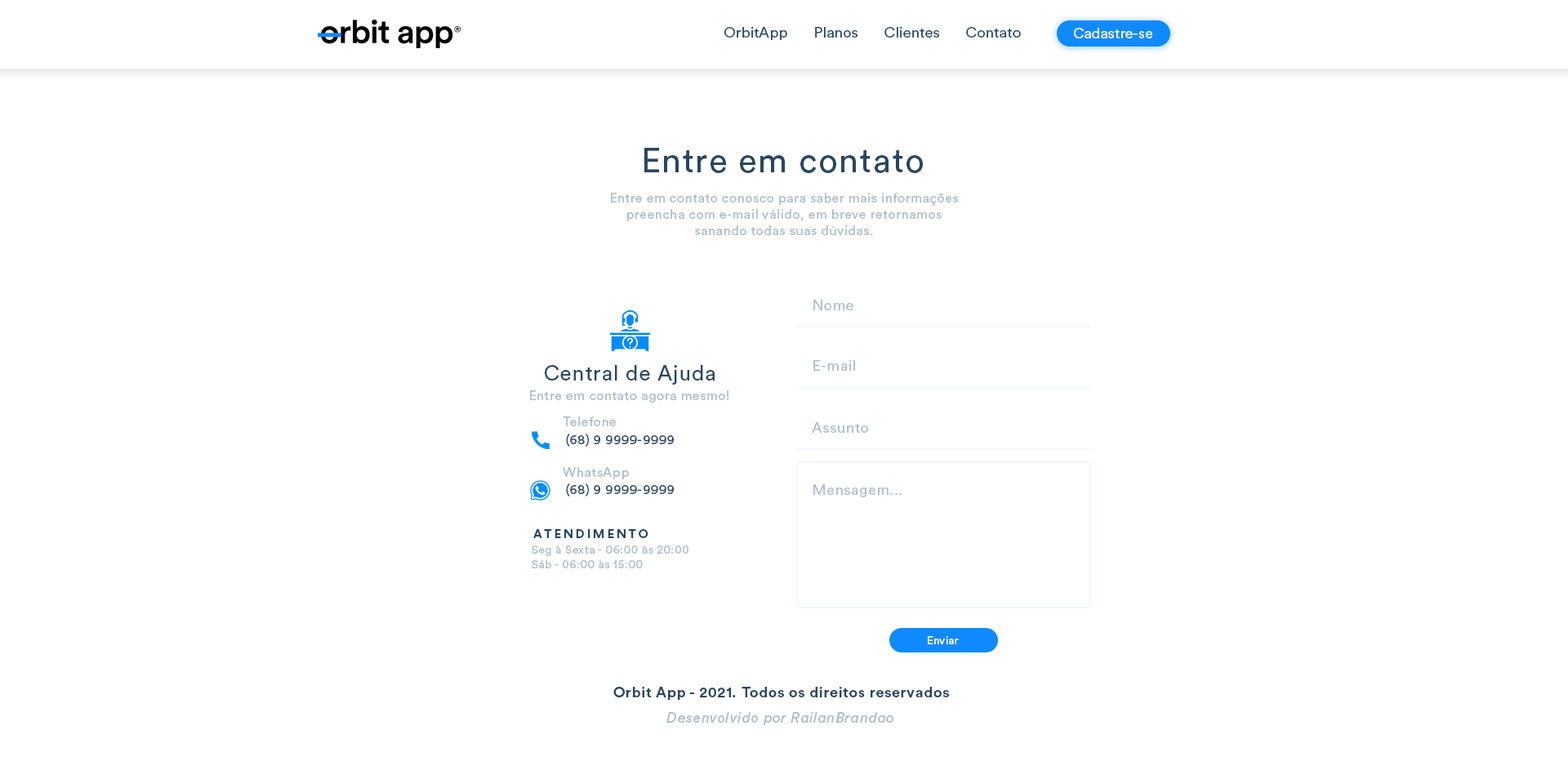
<style>
.page{position:relative;width:1568px;height:757px;background:#ffffff}
.page>*{position:absolute;margin:0}
.t1{font:14.7px "CircularStd-Book";color:#294661}
.t2{font:14.7px "CircularStd-Book";color:#feffff}
.t3{font:34.3px "CircularStd-Book";letter-spacing:0.036em;color:#294661}
.t4{font:13.1px/16.3px "CircularStd-Book";letter-spacing:0.036em;color:#aebcc9}
.t5{font:14.7px "CircularStd-Book";letter-spacing:0.036em;color:#aebcc9}
.t6{font:21.2px "CircularStd-Book";letter-spacing:0.036em;color:#294661}
.t7{font:13.1px "CircularStd-Book";letter-spacing:0.036em;color:#aebcc9}
.t8{font:13.1px "CircularStd-Book";letter-spacing:0.036em;color:#294661}
.t9{font:12.3px "CircularStd-Bold";letter-spacing:0.2em;color:#294661}
.t10{font:11.4px/14.7px "CircularStd-Book";letter-spacing:0.036em;color:#aebcc9}
.t11{font:11.4px "CircularStd-Book";color:#feffff}
.t12{font:14.7px "CircularStd-Bold";letter-spacing:0.036em;color:#294661}
.t13{font:14.7px "CircularStd-BookItalic";letter-spacing:0.036em;color:#aebcc9}
</style>
<div class="page">
<p class="t1" style="left:724px;top:27px;width:297px;height:13px">OrbitApp       Planos       Clientes       Contato</p>
<p class="t2" style="left:1074px;top:28px;width:78px;height:10px">Cadastre-se</p>
<p class="t3" style="left:644px;top:148px;width:279px;height:25px">Entre em contato</p>
<p class="t4" style="left:611px;top:193px;width:347px;height:42px;text-align:center">Entre em contato conosco para saber mais informações<br>preencha com e-mail válido, em breve retornamos<br>sanando todas suas dúvidas.</p>
<p class="t5" style="left:813px;top:300px;width:40px;height:10px">Nome</p>
<p class="t6" style="left:545px;top:365px;width:170px;height:20px">Central de Ajuda</p>
<p class="t5" style="left:813px;top:360px;width:42px;height:11px">E-mail</p>
<p class="t7" style="left:530px;top:390px;width:199px;height:13px">Entre em contato agora mesmo!</p>
<p class="t7" style="left:563px;top:416px;width:53px;height:10px">Telefone</p>
<p class="t5" style="left:812px;top:422px;width:56px;height:11px">Assunto</p>
<p class="t8" style="left:566px;top:434px;width:108px;height:13px">(68) 9 9999-9999</p>
<p class="t7" style="left:563px;top:467px;width:66px;height:12px">WhatsApp</p>
<p class="t8" style="left:566px;top:483px;width:108px;height:14px">(68) 9 9999-9999</p>
<p class="t5" style="left:813px;top:484px;width:89px;height:13px">Mensagem...</p>
<p class="t9" style="left:533px;top:529px;width:115px;height:9px">ATENDIMENTO</p>
<p class="t10" style="left:532px;top:546px;width:156px;height:22px">Seg à Sexta - 06:00 às 20:00<br>Sáb - 06:00 às 15:00</p>
<p class="t11" style="left:928px;top:636px;width:31px;height:8px">Enviar</p>
<p class="t12" style="left:613px;top:687px;width:336px;height:13px">Orbit App - 2021. Todos os direitos reservados</p>
<p class="t13" style="left:666px;top:712px;width:227px;height:13px">Desenvolvido por RailanBrandao</p>
</div>
